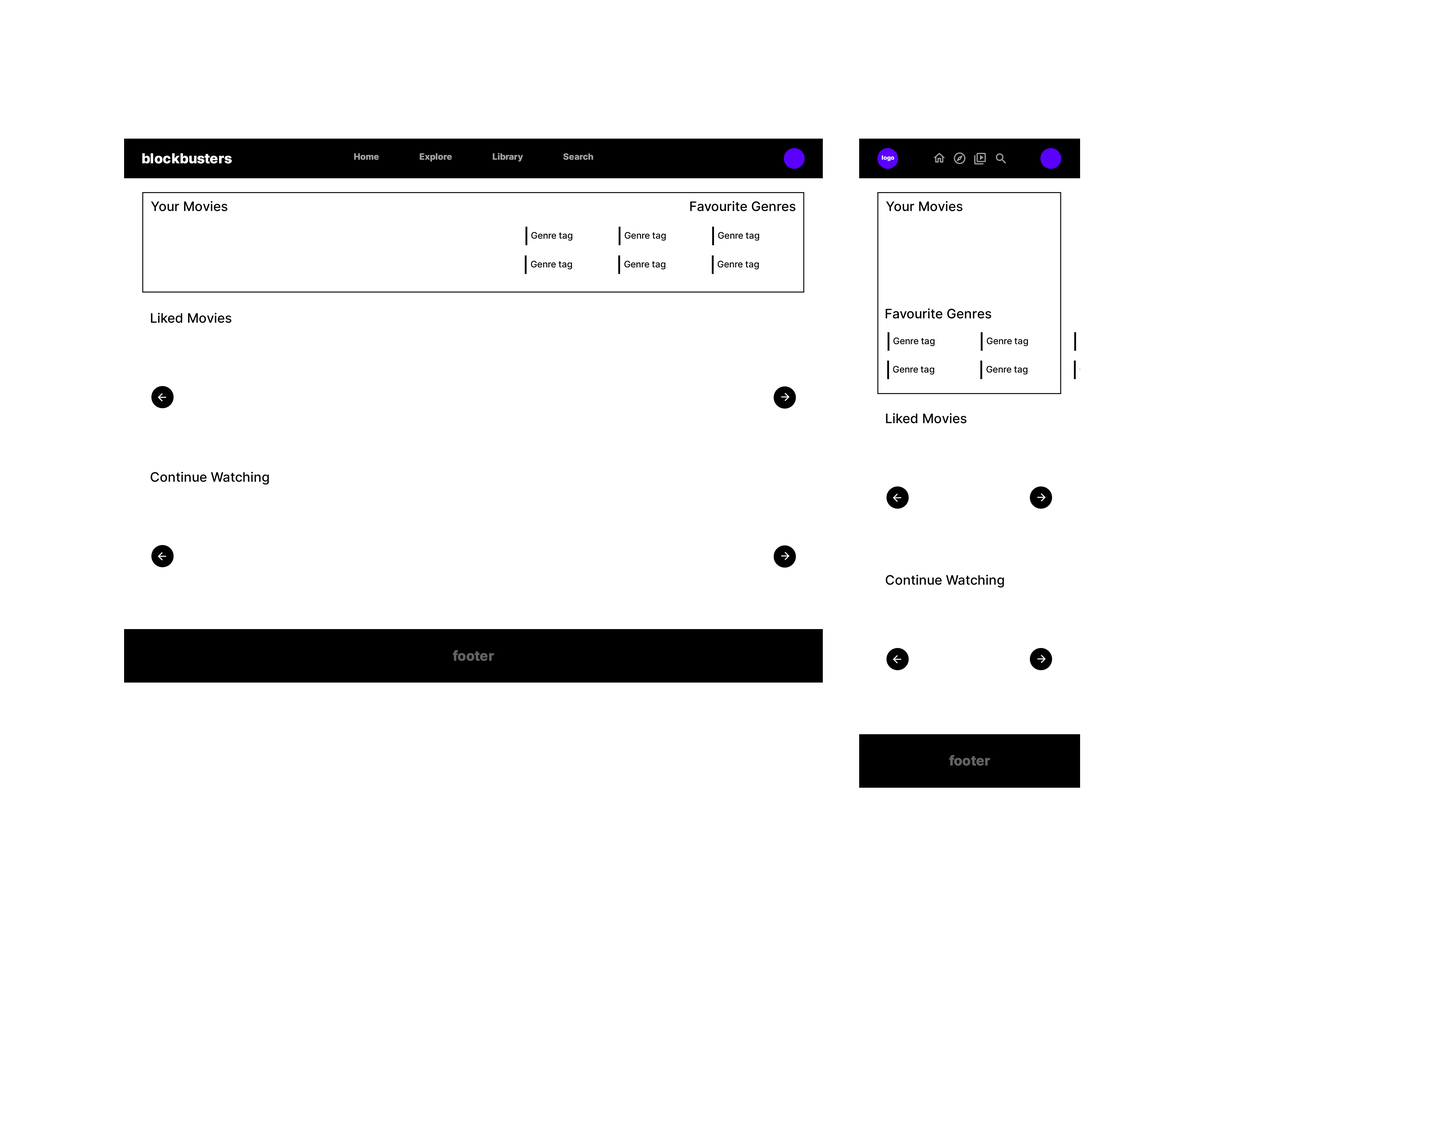
<style>
.page{position:relative;width:1444px;height:1141px;background:#ffffff}
.page>*{position:absolute;margin:0}
.t1{font:13.7px "Inter-ExtraBold";color:#ffffff}
.t2{font:8.7px "Inter-ExtraBold";color:#a2a2a2}
.t3{font:5.8px "Inter-ExtraBold";color:#ffffff}
.t4{font:13.1px "Inter-Medium";color:#000000}
.t5{font:9px "Inter-Medium";color:#000000}
.t6{font:13.7px "Inter-ExtraBold";color:#626262}
</style>
<div class="page">
<p class="t1" style="left:142px;top:153px;width:90px;height:11px">blockbusters</p>
<p class="t2" style="left:354px;top:153px;width:239px;height:9px">Home Explore Library Search</p>
<p class="t3" style="left:882px;top:155px;width:12px;height:6px">logo</p>
<p class="t4" style="left:151px;top:201px;width:76px;height:10px">Your Movies</p>
<p class="t4" style="left:690px;top:201px;width:105px;height:10px">Favourite Genres</p>
<p class="t4" style="left:886px;top:201px;width:76px;height:10px">Your Movies</p>
<p class="t5" style="left:531px;top:232px;width:41px;height:9px">Genre tag</p>
<p class="t5" style="left:624px;top:232px;width:42px;height:9px">Genre tag</p>
<p class="t5" style="left:718px;top:232px;width:41px;height:9px">Genre tag</p>
<p class="t5" style="left:531px;top:261px;width:41px;height:9px">Genre tag</p>
<p class="t5" style="left:624px;top:261px;width:42px;height:9px">Genre tag</p>
<p class="t5" style="left:718px;top:261px;width:41px;height:9px">Genre tag</p>
<p class="t4" style="left:151px;top:313px;width:80px;height:10px">Liked Movies</p>
<p class="t4" style="left:885px;top:308px;width:106px;height:11px">Favourite Genres</p>
<p class="t5" style="left:893px;top:337px;width:41px;height:9px">Genre tag</p>
<p class="t5" style="left:986px;top:337px;width:42px;height:9px">Genre tag</p>
<p class="t5" style="left:893px;top:366px;width:41px;height:9px">Genre tag</p>
<p class="t5" style="left:986px;top:366px;width:42px;height:9px">Genre tag</p>
<p class="t4" style="left:886px;top:413px;width:80px;height:11px">Liked Movies</p>
<p class="t4" style="left:151px;top:472px;width:118px;height:13px">Continue Watching</p>
<p class="t4" style="left:886px;top:575px;width:118px;height:13px">Continue Watching</p>
<p class="t6" style="left:453px;top:650px;width:41px;height:11px">footer</p>
<p class="t6" style="left:949px;top:755px;width:41px;height:11px">footer</p>
</div>
